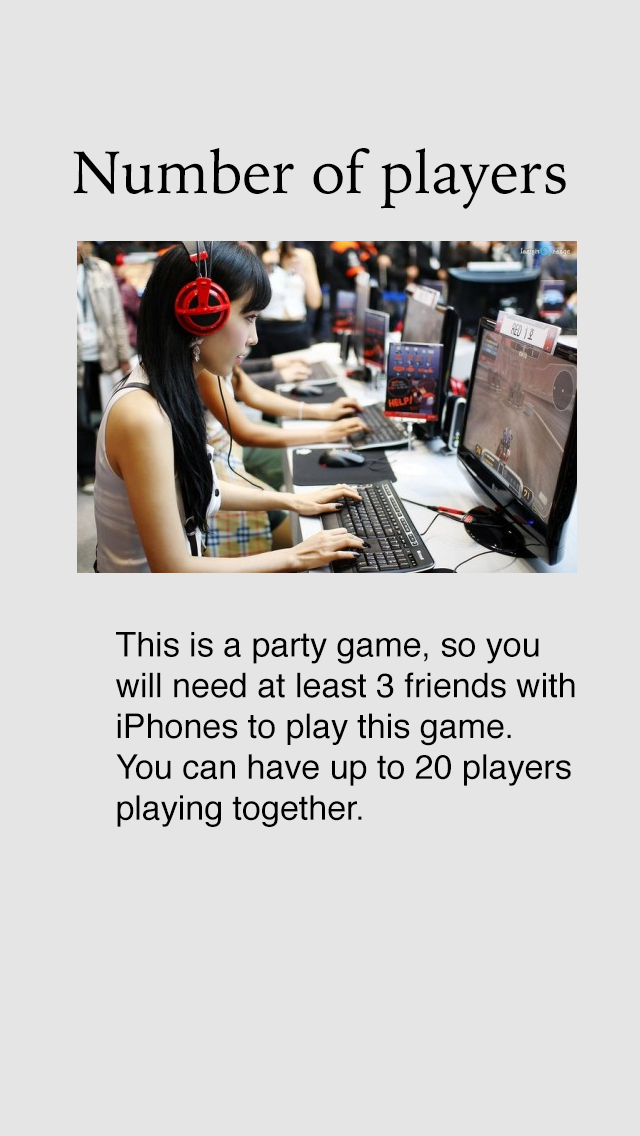
<style>
.page{position:relative;width:640px;height:1136px;background:#e5e5e5}
.page>*{position:absolute;margin:0}
.t1{font:60px "IowanOldStyle-Roman";color:#000000}
.t2{font:34px "Helvetica";color:#000000}
</style>
<div class="page">
<p class="t1" style="left:73px;top:147px;width:493px;height:62px">Number of players</p>
<p class="t2" style="left:116px;top:632px;width:459px;height:195px">This is a party game, so you<br>will need at least 3 friends with<br>iPhones to play this game.<br>You can have up to 20 players<br>playing together.</p>
</div>
